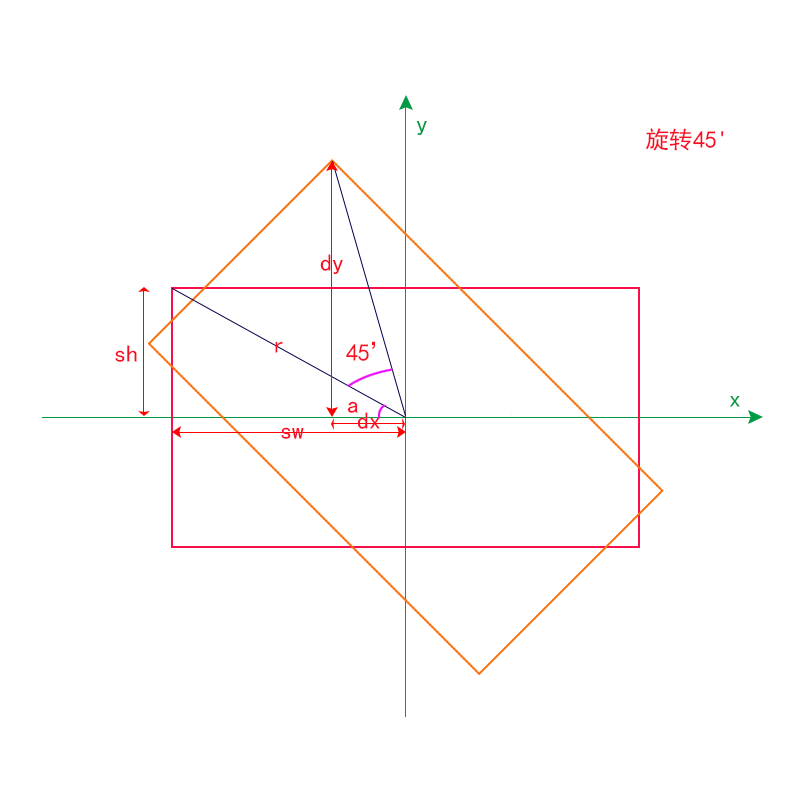
<style>
.page{position:relative;width:800px;height:800px;background:#ffffff}
.page>*{position:absolute;margin:0}
.t1{font:24px "SimHei";color:#009944}
.t2{font:24px "SimHei";color:#f80e24}
</style>
<div class="page">
<p class="t1" style="left:416px;top:120px;width:11px;height:16px">y</p>
<p class="t2" style="left:645px;top:128px;width:79px;height:23px">旋转45'</p>
<p class="t2" style="left:320px;top:254px;width:23px;height:21px">dy</p>
<p class="t2" style="left:275px;top:341px;width:8px;height:12px">r</p>
<p class="t2" style="left:346px;top:341px;width:30px;height:20px">45’</p>
<p class="t2" style="left:115px;top:345px;width:22px;height:17px">sh</p>
<p class="t2" style="left:347px;top:401px;width:11px;height:12px">a</p>
<p class="t1" style="left:730px;top:395px;width:10px;height:12px">x</p>
<p class="t2" style="left:357px;top:412px;width:23px;height:17px">dx</p>
<p class="t2" style="left:281px;top:427px;width:23px;height:12px">sw</p>
</div>
